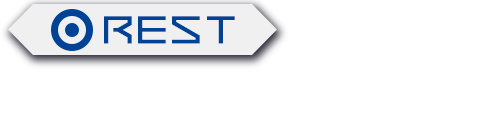
<style>
.page{position:relative;width:504px;height:129px;background:#ffffff}
.page>*{position:absolute;margin:0}
.t1{font:30.6px "7THDR2020ThinRegular";letter-spacing:0.1em;color:#004396;font-weight:bold}
</style>
<div class="page">
<p class="t1" style="left:104px;top:16px;width:131px;height:28px">REST</p>
</div>
